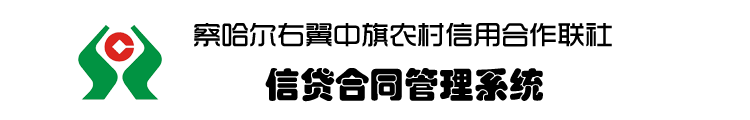
<style>
.page{position:relative;width:750px;height:120px;background:#ffffff}
.page>*{position:absolute;margin:0}
.t1{font:28px "TRENDS";color:#000000}
.t2{font:35px "STHupo";color:#000000}
</style>
<div class="page">
<p class="t1" style="left:194px;top:23px;width:418px;height:24px">察哈尔右翼中旗农村信用合作联社</p>
<p class="t2" style="left:265px;top:68px;width:278px;height:34px">信贷合同管理系统</p>
</div>
